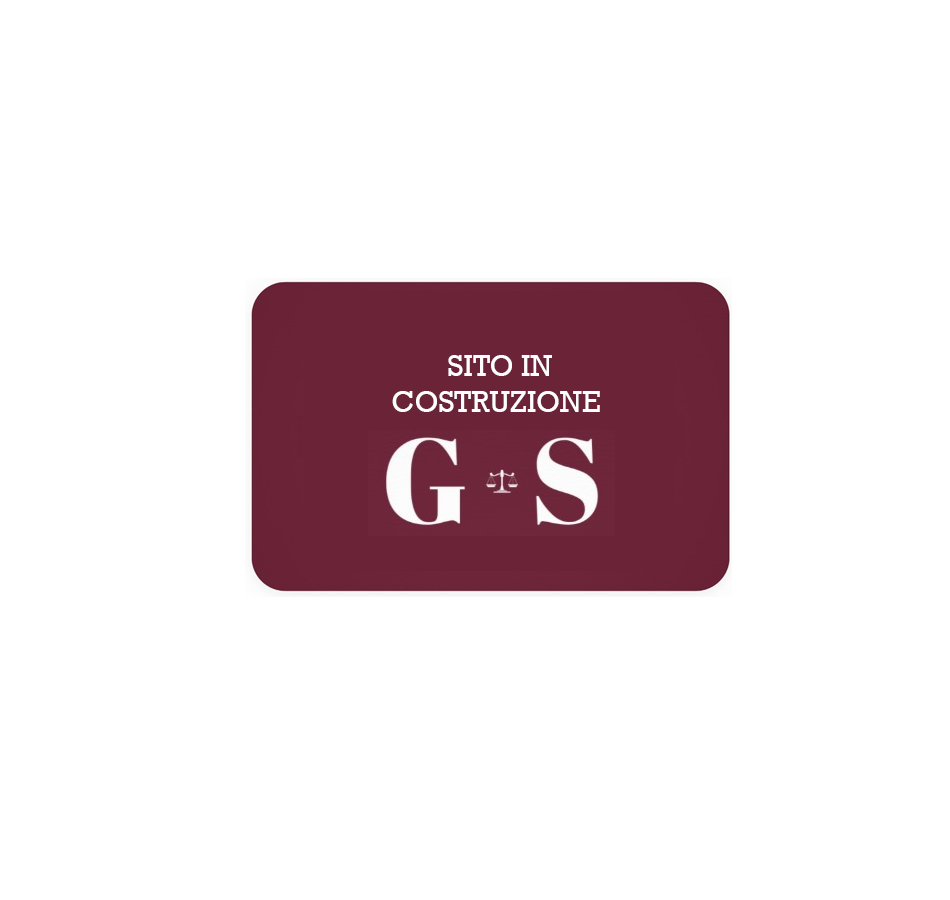
<style>
.page{position:relative;width:950px;height:900px;background:#ffffff}
.page>*{position:absolute;margin:0}
.t1{font:30px "Rockwell";color:#ffffff}
</style>
<div class="page">
<p class="t1" style="left:392px;top:355px;width:208px;height:57px;text-align:center">SITO IN <br>COSTRUZIONE</p>
</div>
